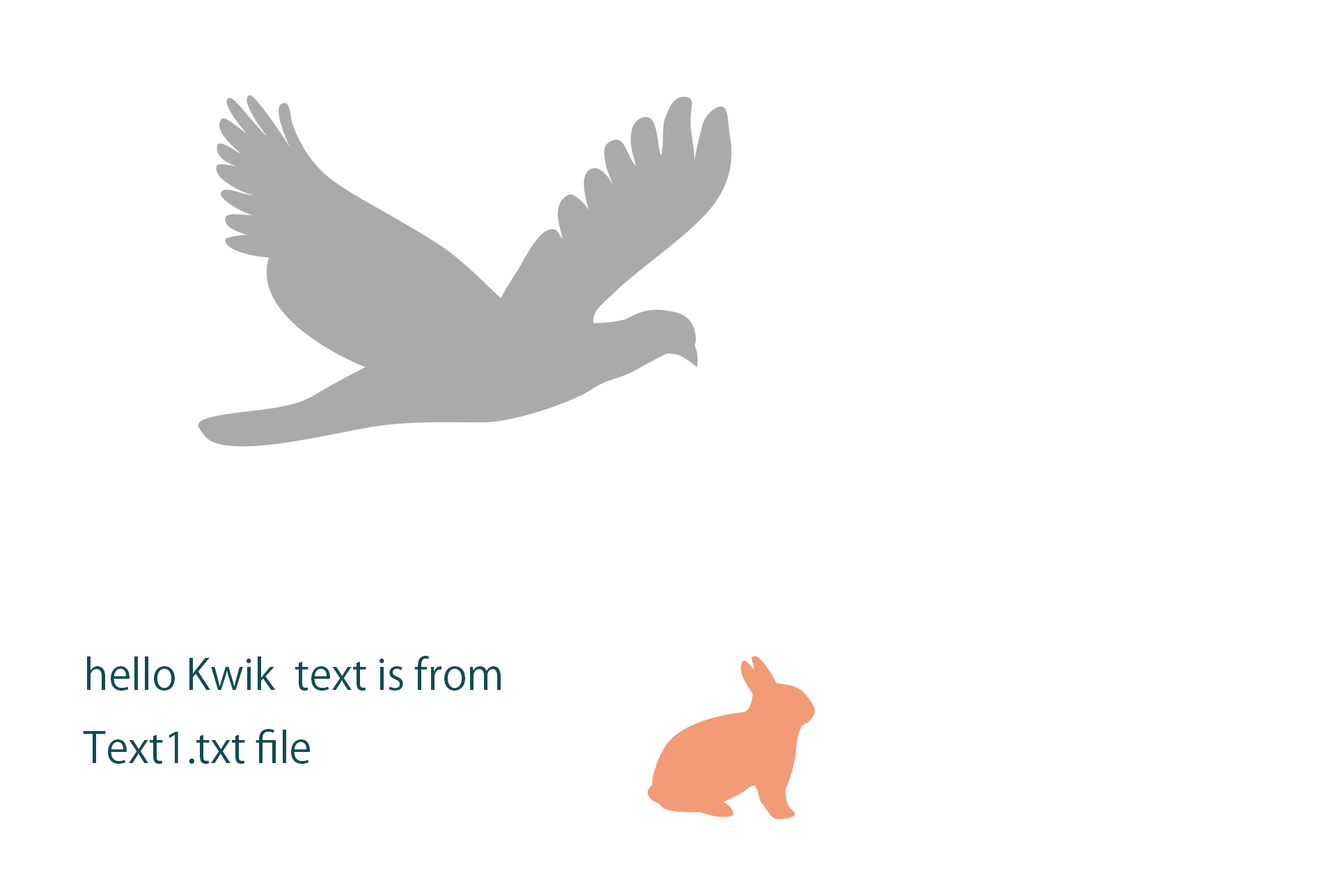
<style>
.page{position:relative;width:1337px;height:892px;background:#ffffff}
.page>*{position:absolute;margin:0}
.t1{font:41.8px "KozGoPr6N-Regular";color:#114b56}
</style>
<div class="page">
<p class="t1" style="left:83px;top:655px;width:418px;height:108px">hello Kwik  text is from Text1.txt file</p>
</div>
